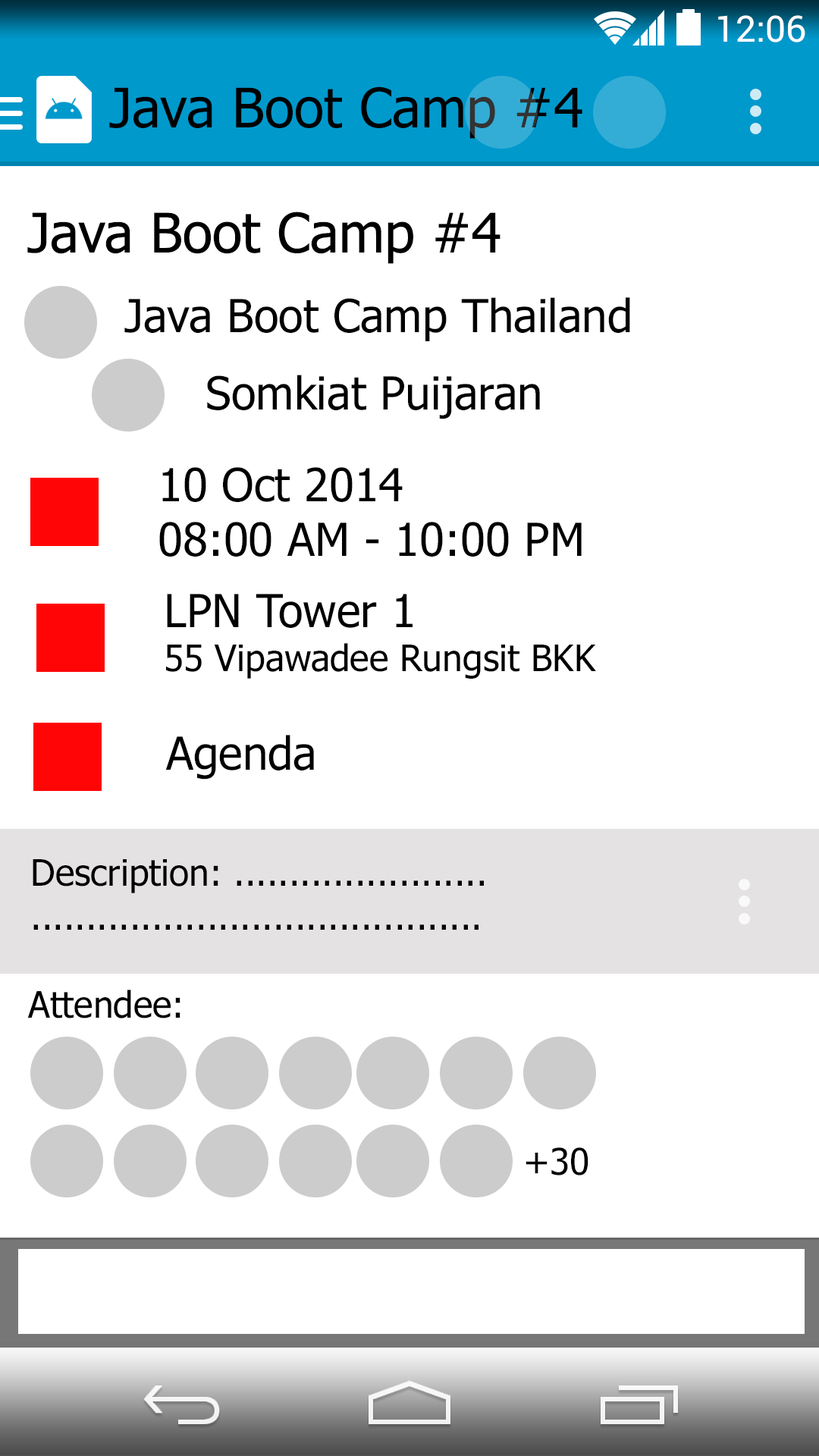
<style>
.page{position:relative;width:819px;height:1456px;background:#ffffff}
.page>*{position:absolute;margin:0}
.t1{font:36.4px "Roboto-Regular";color:#ffffff}
.t2{font:54.6px "Tahoma";color:#000000}
.t3{font:45.5px "Tahoma";color:#000000}
.t4{font:36.4px "Tahoma";color:#000000}
</style>
<div class="page">
<p class="t1" style="left:718px;top:15px;width:87px;height:27px">12:06</p>
<p class="t2" style="left:109px;top:86px;width:473px;height:53px">Java Boot Camp #4</p>
<p class="t2" style="left:27px;top:212px;width:473px;height:52px">Java Boot Camp #4</p>
<p class="t3" style="left:124px;top:297px;width:506px;height:44px">Java Boot Camp Thailand</p>
<p class="t3" style="left:207px;top:375px;width:333px;height:44px">Somkiat Puijaran</p>
<p class="t3" style="left:159px;top:467px;width:423px;height:90px">10 Oct 2014<br>08:00 AM - 10:00 PM</p>
<p class="t4" style="left:166px;top:594px;width:430px;height:85px"><span class="t3">LPN Tower 1<br></span>55 Vipawadee Rungsit BKK</p>
<p class="t3" style="left:165px;top:735px;width:149px;height:45px">Agenda</p>
<p class="t4" style="left:33px;top:859px;width:451px;height:71px">Description: .......................<br>.........................................</p>
<p class="t4" style="left:27px;top:990px;width:153px;height:28px">Attendee:</p>
<p class="t4" style="left:526px;top:1147px;width:62px;height:28px">+30</p>
</div>
